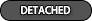
<style>
.page{position:relative;width:92px;height:21px;background:#535353}
.page>*{position:absolute;margin:0}
.t1{font:10px "AdobeHeitiStd-Regular";color:#ffffff}
</style>
<div class="page">
<p class="t1" style="left:21px;top:6px;width:50px;height:9px">DETACHED</p>
</div>
